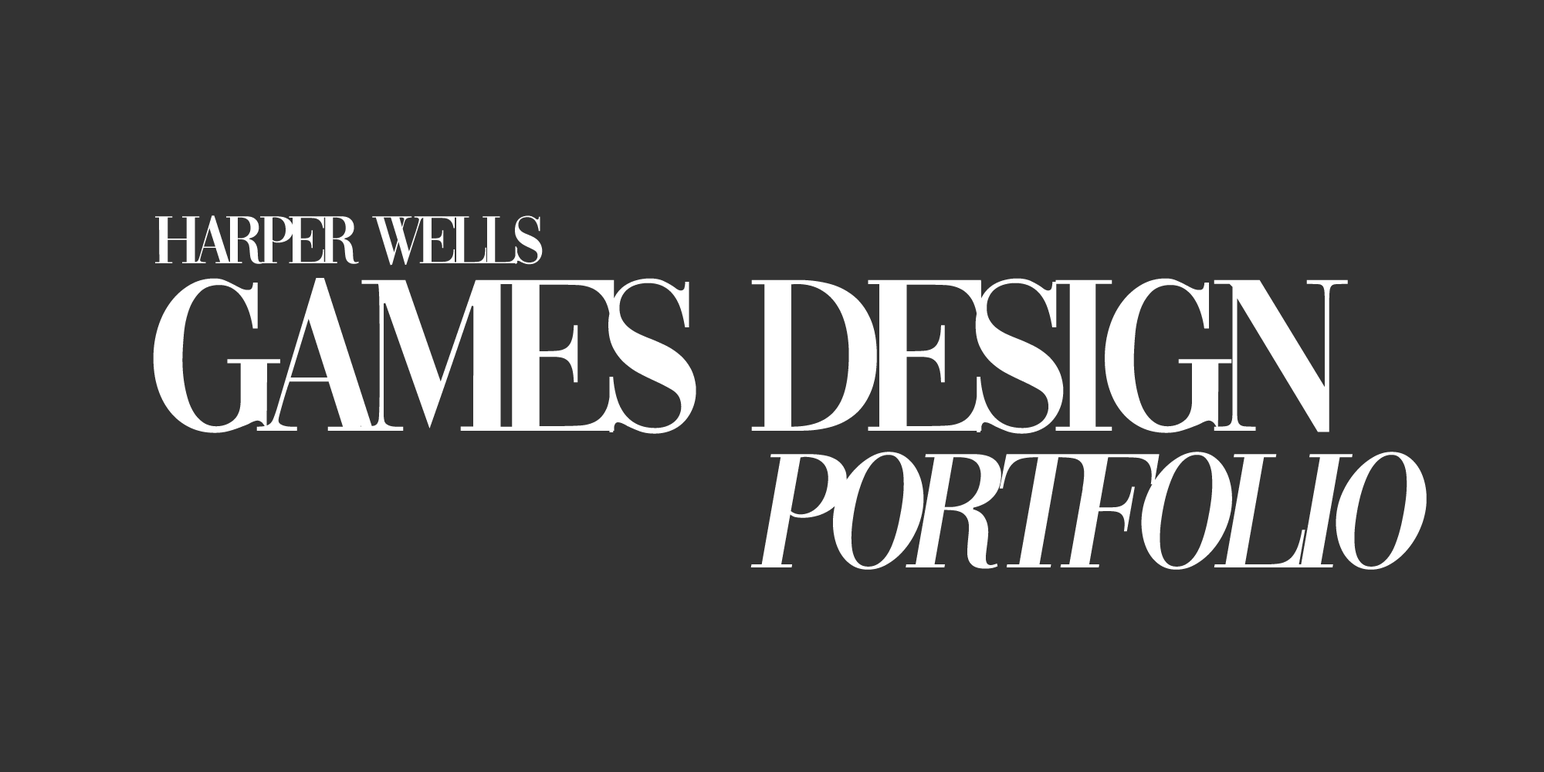
<style>
.page{position:relative;width:1544px;height:772px;background:#333333}
.page>*{position:absolute;margin:0}
.t1{font:70.4px "Vogue-Regular";letter-spacing:-0.1em;color:#ffffff}
.t2{font:225.7px "Vogue-Regular";letter-spacing:-0.1em;color:#ffffff}
.t3{font:169.8px "Vogue-Regular";letter-spacing:-0.1em;color:#ffffff;font-style:italic}
</style>
<div class="page">
<p class="t1" style="left:155px;top:215px;width:388px;height:51px">HaRPER WELLS</p>
<p class="t2" style="left:153px;top:278px;width:1195px;height:156px">GAMES DESIGN</p>
<p class="t3" style="left:751px;top:452px;width:676px;height:118px">PORTFOLIO</p>
</div>
